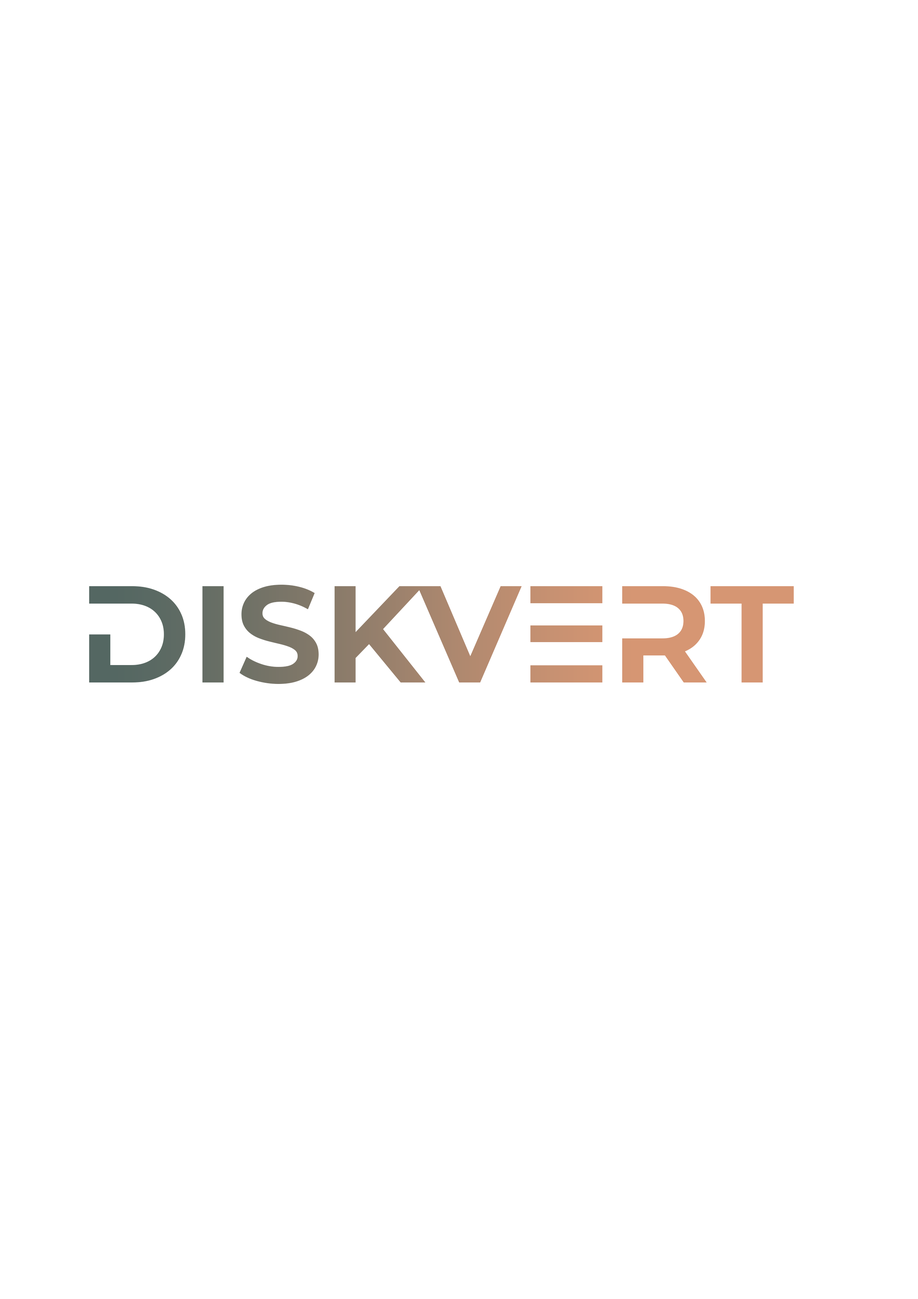
<style>
.page{position:relative;width:918px;height:1299px;background:#ffffff}
.page>*{position:absolute;margin:0}
.t1{font:137.3px "MontserratAlt1-Bold";text-transform:uppercase}
</style>
<div class="page">
<p class="t1" style="left:89px;top:585px;width:705px;height:99px">Diskvert</p>
</div>
